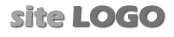
<style>
.page{position:relative;width:174px;height:37px;background:#ffffff}
.page>*{position:absolute;margin:0}
.t1{font:30px "ErasITC-Bold";color:#a3a3a3}
.t2{font:30px "ErasITC-Bold";color:#747474}
</style>
<div class="page">
<p class="t1" style="left:10px;top:5px;width:154px;height:22px">site <span class="t2">LOGO</span></p>
</div>
